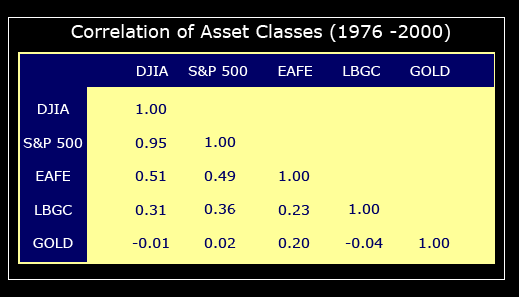
<style>
.page{position:relative;width:519px;height:297px;background:#ffff99}
.page>*{position:absolute;margin:0}
.t1{font:18px "Verdana";color:#ffffff}
.t2{font:14px "Verdana";color:#ffffff}
.t3{font:14px "Verdana";color:#000066}
</style>
<div class="page">
<p class="t1" style="left:71px;top:24px;width:379px;height:18px">Correlation of Asset Classes (1976 -2000)</p>
<p class="t2" style="left:137px;top:66px;width:313px;height:10px">DJIA    S&amp;P 500      EAFE      LBGC      GOLD</p>
<p class="t2" style="left:23px;top:104px;width:60px;height:144px;text-align:center">DJIA<br><br>S&amp;P 500<br><br>EAFE<br><br>LBGC<br><br>GOLD</p>
<p class="t3" style="left:132px;top:104px;width:37px;height:144px;text-align:center">1.00<br><br>0.95<br><br>0.51<br><br>0.31<br><br>-0.01</p>
<p class="t3" style="left:204px;top:137px;width:32px;height:111px;text-align:center">1.00<br><br>0.49<br><br>0.36<br><br>0.02</p>
<p class="t3" style="left:278px;top:171px;width:32px;height:77px;text-align:center">1.00<br><br>0.23<br><br>0.20</p>
<p class="t3" style="left:345px;top:204px;width:38px;height:44px;text-align:center">1.00<br><br>-0.04</p>
<p class="t3" style="left:419px;top:238px;width:31px;height:10px">1.00</p>
</div>
